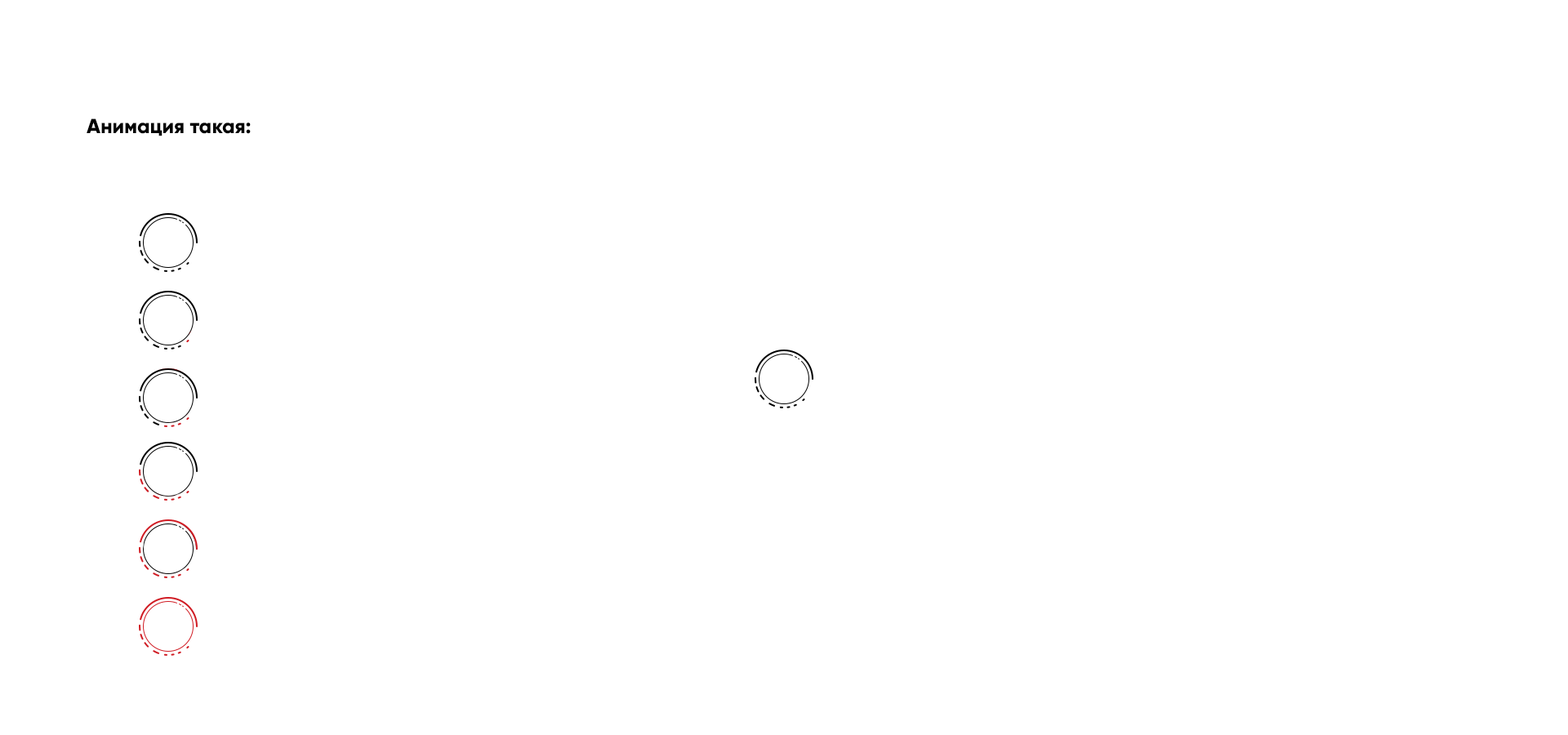
<style>
.page{position:relative;width:1568px;height:735px;background:#ffffff}
.page>*{position:absolute;margin:0}
.t1{font:20.4px "Gilroy-ExtraBold";color:#000000}
</style>
<div class="page">
<p class="t1" style="left:87px;top:118px;width:164px;height:18px">Анимация такая:</p>
</div>
